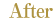
<style>
.page{position:relative;width:54px;height:19px;background:#ffffff}
.page>*{position:absolute;margin:0}
.t1{font:20px "RyuminPro-ExBold";letter-spacing:-0.04em;color:#ae9340;scale:0.9 1}
</style>
<div class="page">
<p class="t1" style="left:9px;top:3px;width:44px;height:15px">After</p>
</div>
